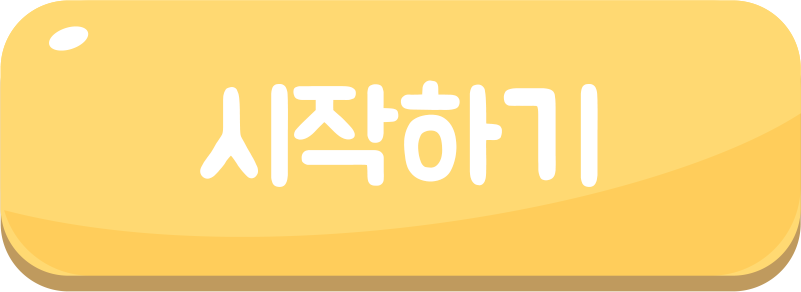
<style>
.page{position:relative;width:801px;height:292px;background:#ffd972}
.page>*{position:absolute;margin:0}
.t1{font:125px "BMJUA";color:#ffffff}
</style>
<div class="page">
<p class="t1" style="left:200px;top:80px;width:398px;height:107px">시작하기</p>
</div>
